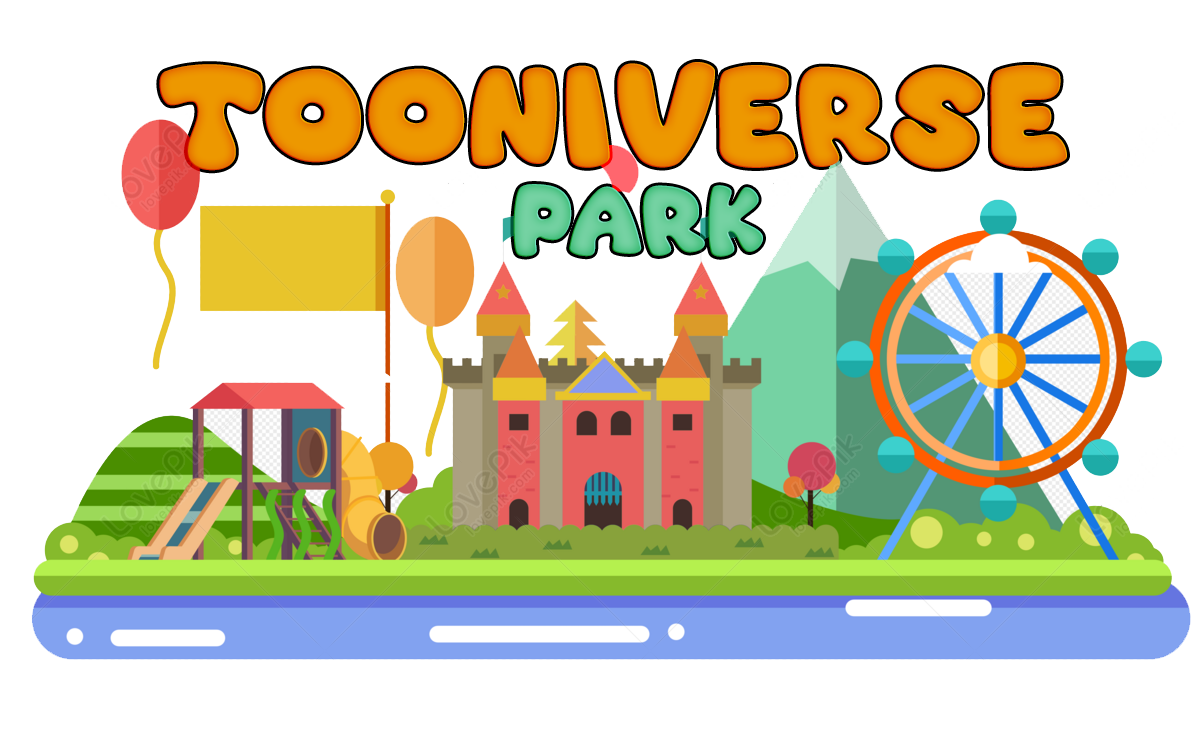
<style>
.page{position:relative;width:1200px;height:739px;background:#ffffff}
.page>*{position:absolute;margin:0}
.t1{font:120px "SuperBubble";color:#ed9800;font-variant:small-caps;font-weight:bold}
.t2{font:120px "SuperBubble";color:#75d2a3;font-variant:small-caps;font-weight:bold}
</style>
<div class="page">
<p class="t1" style="left:159px;top:62px;width:908px;height:109px">TOONIVERSE</p>
<p class="t2" style="left:513px;top:184px;width:250px;height:73px">park</p>
</div>
